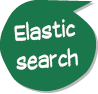
<style>
.page{position:relative;width:98px;height:94px;background:#1a774b}
.page>*{position:absolute;margin:0}
.t1{font:24px "SuplexmentaryComicNC";color:#ffffff;scale:0.8 1}
</style>
<div class="page">
<p class="t1" style="left:14px;top:19px;width:64px;height:51px;text-align:center;rotate:-4deg">Elastic<br>search</p>
</div>
